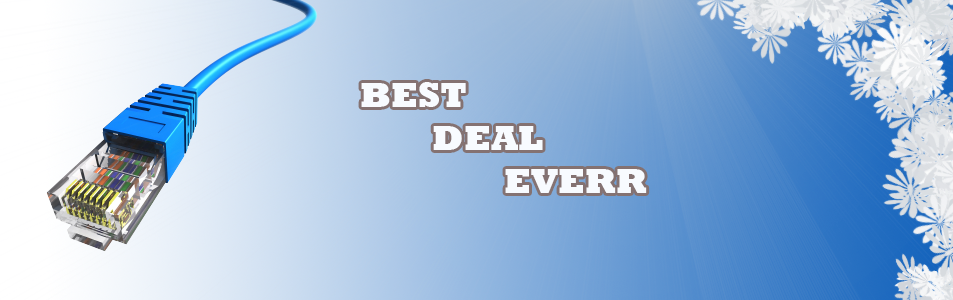
<style>
.page{position:relative;width:953px;height:300px}
.page>*{position:absolute;margin:0}
.t1{font:36px "Rockwell-ExtraBold";color:#f8fbff}
</style>
<div class="page">
<p class="t1" style="left:361px;top:82px;width:286px;height:111px">BEST <br>  DEAL<br>    EVERR</p>
</div>
